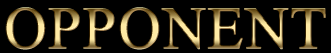
<style>
.page{position:relative;width:331px;height:53px;background:#000000}
.page>*{position:absolute;margin:0}
.t1{font:60px "TimesNewRomanPSMT";font-variant:small-caps;font-weight:bold}
</style>
<div class="page">
<p class="t1" style="left:5px;top:7px;width:321px;height:43px">OPPONENT</p>
</div>
